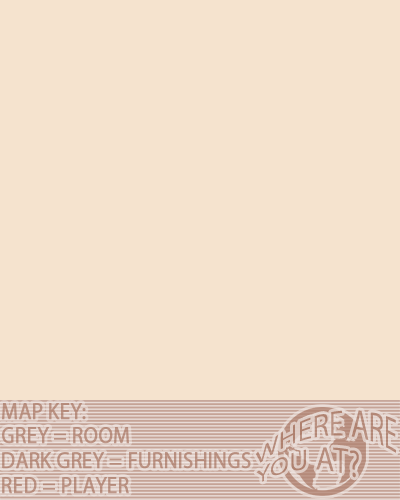
<style>
.page{position:relative;width:400px;height:500px;background:#f5e3ce}
.page>*{position:absolute;margin:0}
.t1{font:20.9px "KozGoPr6N-Regular";color:#b78d7d;font-weight:bold;scale:0.92 1}
.t2{font:29.2px "KozGoPr6N-Regular";color:#b48978;scale:0.92 1}
.t3{font:20.9px "KozGoPr6N-Regular";color:#ba9283;font-weight:bold;scale:0.92 1}
</style>
<div class="page">
<p class="t1" style="left:2px;top:403px;width:84px;height:17px">MAP KEY:</p>
<p class="t2" style="left:256px;top:410px;width:140px;height:72px">WHERE ARE <br>YOU AT?</p>
<p class="t3" style="left:2px;top:427px;width:249px;height:67px">GREY = ROOM<br>DARK GREY = FURNISHINGS<br>RED = PLAYER</p>
</div>
